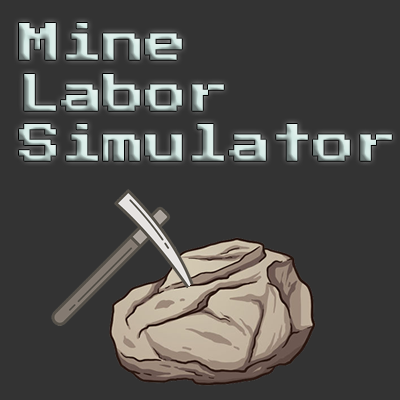
<style>
.page{position:relative;width:400px;height:400px;background:#333333}
.page>*{position:absolute;margin:0}
.t1{font:42px "PressStart2P-Regular"}
</style>
<div class="page">
<p class="t1" style="left:19px;top:23px;width:373px;height:138px">Mine Labor Simulator</p>
</div>
